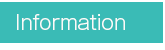
<style>
.page{position:relative;width:165px;height:50px;background:#3abbb6}
.page>*{position:absolute;margin:0}
.t1{font:20px "GothicMB101Pro-Light";color:#fbfbf9}
</style>
<div class="page">
<p class="t1" style="left:17px;top:14px;width:108px;height:16px">Information</p>
</div>
